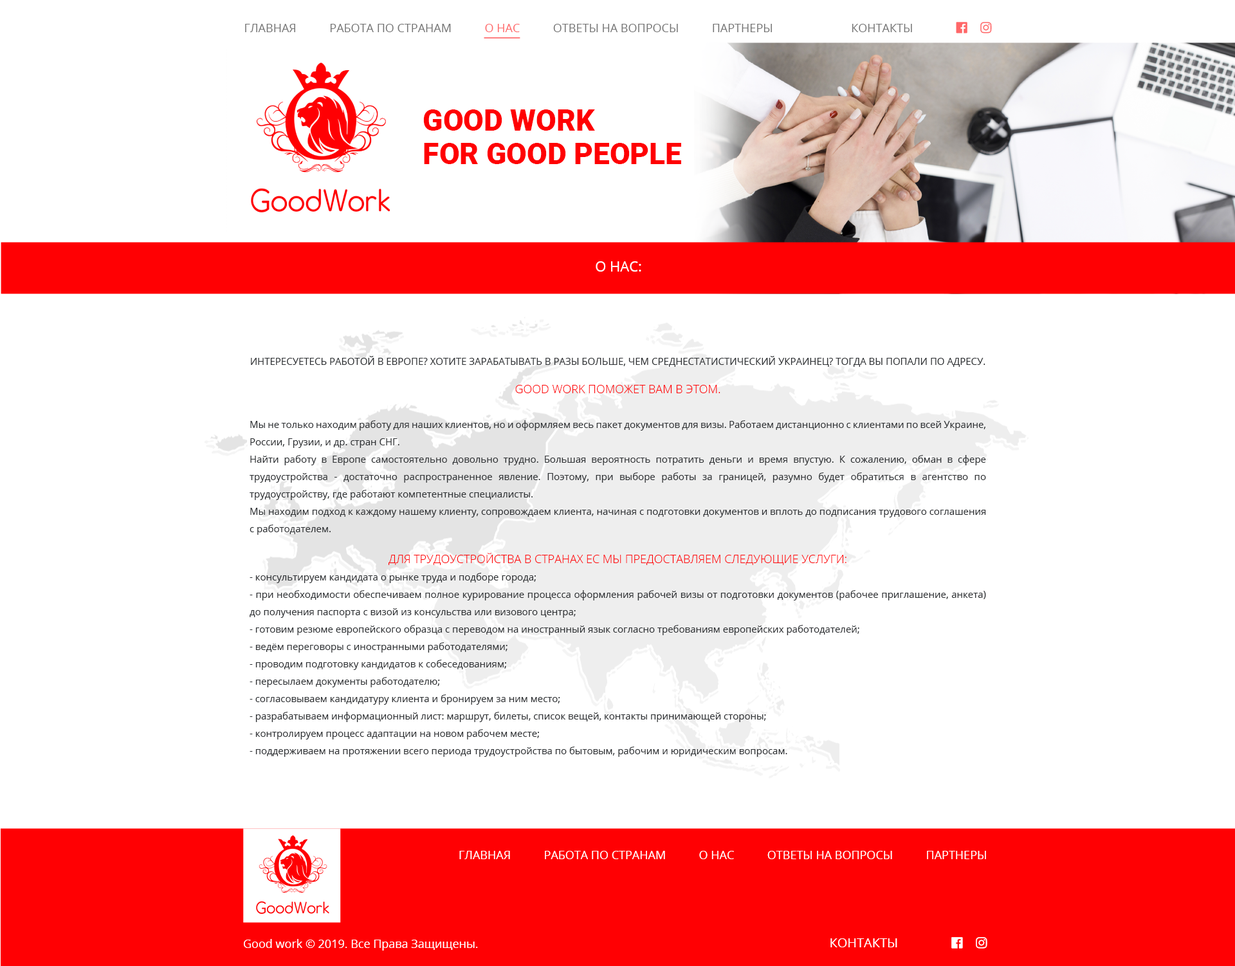
<style>
.page{position:relative;width:1235px;height:966px;background:#ffffff}
.page>*{position:absolute;margin:0}
.t1{font:29.6px/33.4px "Roboto-Black";color:#ff0003}
.t2{font:14.2px "OpenSans";color:#ffffff}
.t3{font:9.6px/17.4px "OpenSans";color:#2d3033}
.t4{font:11.6px "OpenSans-Light";color:#ff0003}
.t5{font:11.6px "OpenSans";color:#ffffff}
</style>
<div class="page">
<p class="t1" style="left:423px;top:109px;width:258px;height:55px">GOOD WORK<br>FOR GOOD PEOPLE</p>
<p class="t2" style="left:596px;top:261px;width:45px;height:10px">О НАС:</p>
<p class="t3" style="left:250px;top:356px;width:736px;height:400px;text-align:center">ИНТЕРЕСУЕТЕСЬ РАБОТОЙ В ЕВРОПЕ? ХОТИТЕ ЗАРАБАТЫВАТЬ В РАЗЫ БОЛЬШЕ, ЧЕМ СРЕДНЕСТАТИСТИЧЕСКИЙ УКРАИНЕЦ? ТОГДА ВЫ ПОПАЛИ ПО АДРЕСУ. <br><span class="t4"><br>GOOD WORK ПОМОЖЕТ ВАМ В ЭТОМ.<br></span><br>Мы не только находим работу для наших клиентов, но и оформляем весь пакет документов для визы. Работаем дистанционно с клиентами по всей Украине, России, Грузии, и др. стран СНГ. <br>Найти работу в Европе самостоятельно довольно трудно. Большая вероятность потратить деньги и время впустую. К сожалению, обман в сфере трудоустройства - достаточно распространенное явление. Поэтому, при выборе работы за границей, разумно будет обратиться в агентство по трудоустройству, где работают компетентные специалисты.<br>Мы находим подход к каждому нашему клиенту, сопровождаем клиента, начиная с подготовки документов и вплоть до подписания трудового соглашения с работодателем. <br><br><span class="t4">ДЛЯ ТРУДОУСТРОЙСТВА В СТРАНАХ ЕС МЫ ПРЕДОСТАВЛЯЕМ СЛЕДУЮЩИЕ УСЛУГИ:<br></span>- консультируем кандидата о рынке труда и подборе города;<br>- при необходимости обеспечиваем полное курирование процесса оформления рабочей визы от подготовки документов (рабочее приглашение, анкета) до получения паспорта с визой из консульства или визового центра;<br>- готовим резюме европейского образца с переводом на иностранный язык согласно требованиям европейских работодателей;<br>- ведём переговоры с иностранными работодателями;<br>- проводим подготовку кандидатов к собеседованиям;<br>- пересылаем документы работодателю;<br>- согласовываем кандидатуру клиента и бронируем за ним место;<br>- разрабатываем информационный лист: маршрут, билеты, список вещей, контакты принимающей стороны;<br>- контролируем процесс адаптации на новом рабочем месте;<br>- поддерживаем на протяжении всего периода трудоустройства по бытовым, рабочим и юридическим вопросам.</p>
<p class="t5" style="left:459px;top:850px;width:527px;height:9px">ГЛАВНАЯ           РАБОТА ПО СТРАНАМ           О НАС           ОТВЕТЫ НА ВОПРОСЫ           ПАРТНЕРЫ</p>
<p class="t5" style="left:244px;top:938px;width:234px;height:12px">Good work © 2019. Все Права Защищены.</p>
</div>
